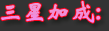
<style>
.page{position:relative;width:109px;height:31px;background:#333333}
.page>*{position:absolute;margin:0}
.t1{font:24px "STXinwei";letter-spacing:-0.02em;color:#ef8fd6;font-weight:bold}
</style>
<div class="page">
<p class="t1" style="left:1px;top:1px;width:100px;height:22px">三星加成:</p>
</div>
